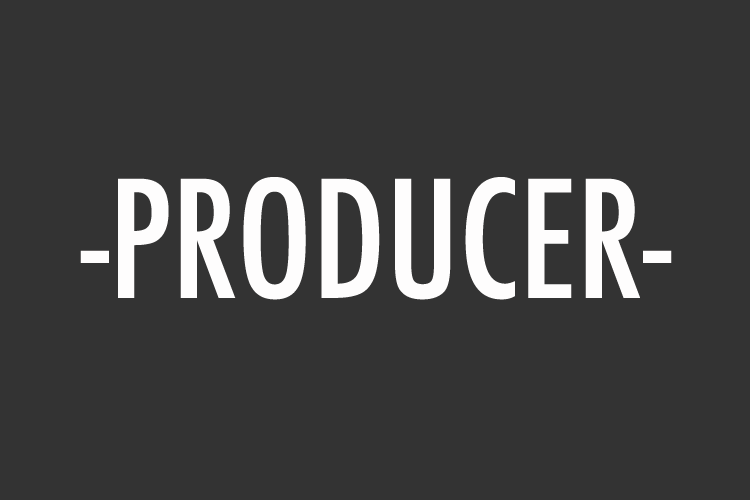
<style>
.page{position:relative;width:750px;height:500px;background:#333333}
.page>*{position:absolute;margin:0}
.t1{font:158px "Futura-CondensedMedium";color:#fefdfd}
</style>
<div class="page">
<p class="t1" style="left:80px;top:177px;width:592px;height:123px">-PRODUCER-</p>
</div>
